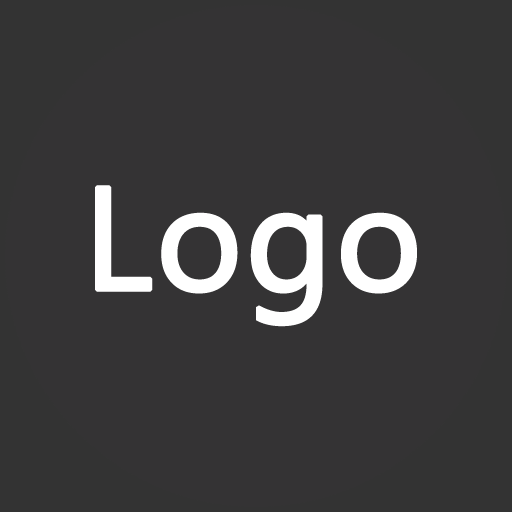
<style>
.page{position:relative;width:512px;height:512px;background:#343334}
.page>*{position:absolute;margin:0}
.t1{font:146.2px "KhmerUI";color:#ffffff;font-weight:bold}
</style>
<div class="page">
<p class="t1" style="left:95px;top:185px;width:322px;height:142px">Logo</p>
</div>
